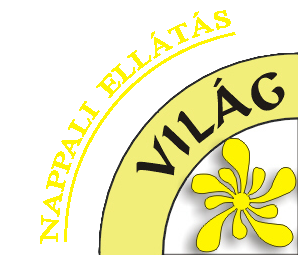
<style>
.page{position:relative;width:298px;height:255px;background:#ffffff}
.page>*{position:absolute;margin:0}
.t1{font:37.5px "Microsoft-Himalaya";color:#fff502;text-decoration:underline}
</style>
<div class="page">
<p class="t1" style="left:40px;top:10px;width:196px;height:234px;rotate:-40deg">NAPPALI  ELLÁTÁS</p>
</div>
